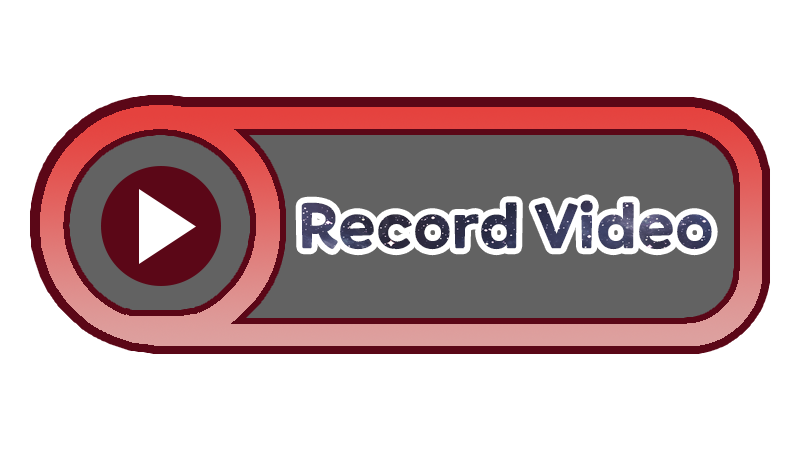
<style>
.page{position:relative;width:800px;height:450px;background:#ffffff}
.page>*{position:absolute;margin:0}
.t1{font:60px "ONEMobilePOPOTFRegular"}
</style>
<div class="page">
<p class="t1" style="left:301px;top:200px;width:411px;height:50px">Record Video</p>
</div>
